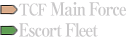
<style>
.page{position:relative;width:129px;height:40px;background:#ffffff}
.page>*{position:absolute;margin:0}
.t1{font:18px/21px "RyuminPro-ExBold";letter-spacing:-0.08em;color:#c9c8c9;scale:0.9 1}
.t2{font:16px/21px "RyuminPro-ExBold";letter-spacing:-0.08em;color:#c9c8c9;scale:0.9 1}
</style>
<div class="page">
<p class="t1" style="left:18px;top:2px;width:108px;height:35px"><span class="t2">TCF</span> Main Force<br>Escort Fleet</p>
</div>
